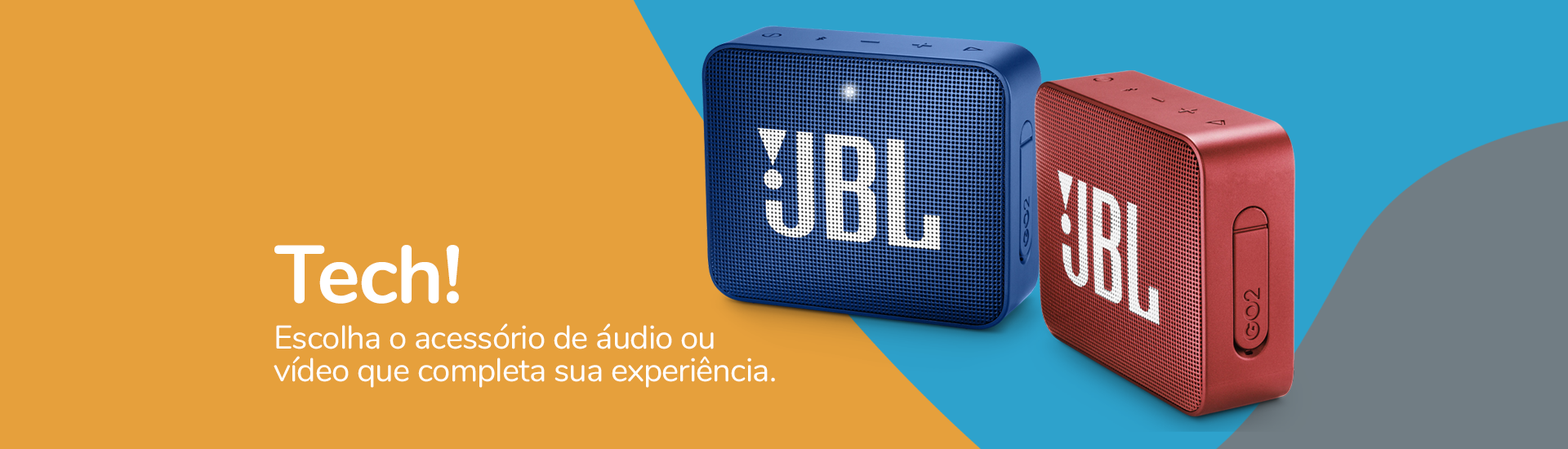
<style>
.page{position:relative;width:1568px;height:449px;background:#e6a03c}
.page>*{position:absolute;margin:0}
.t1{font:81.7px "Nunito-Bold";letter-spacing:-0.02em;color:#ffffff}
.t2{font:32.7px/32.7px "Nunito-Regular";letter-spacing:-0.02em;color:#ffffff}
</style>
<div class="page">
<p class="t1" style="left:274px;top:245px;width:185px;height:59px">Tech!</p>
<p class="t2" style="left:274px;top:323px;width:501px;height:65px">Escolha o acessório de áudio ou<br>vídeo que completa sua experiência.</p>
</div>
